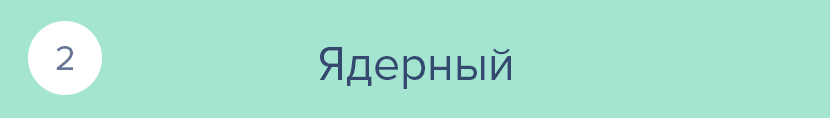
<style>
.page{position:relative;width:830px;height:118px;background:#a4e5d1}
.page>*{position:absolute;margin:0}
.t1{font:36px "ProximaNova-Regular";color:#647493}
.t2{font:48px "ProximaNova-Regular";color:#344870}
</style>
<div class="page">
<p class="t1" style="left:56px;top:46px;width:17px;height:24px">2</p>
<p class="t2" style="left:319px;top:47px;width:192px;height:42px">Ядерный</p>
</div>
